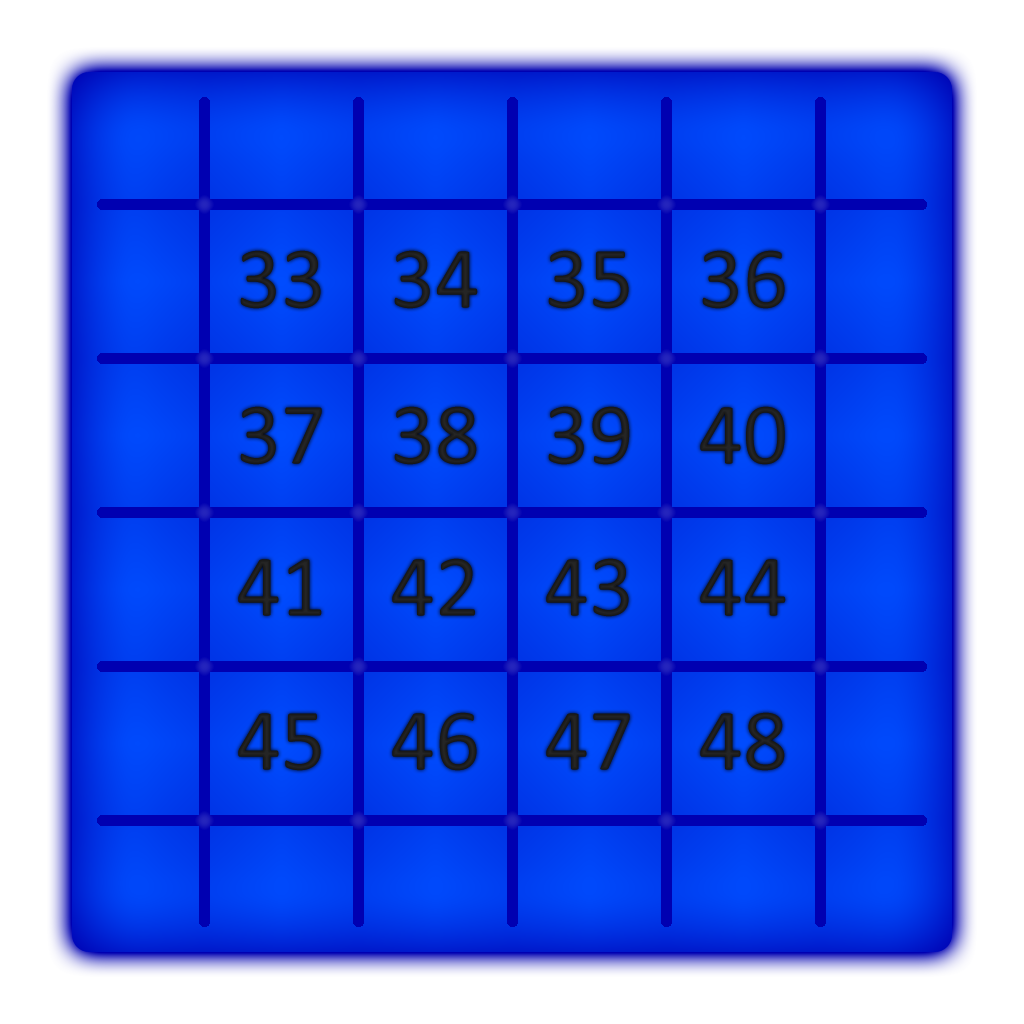
<style>
.page{position:relative;width:1024px;height:1024px}
.page>*{position:absolute;margin:0}
.t1{font:88.5px "Calibri";color:#1d1d1d}
.t2{font:88.5px "Calibri";color:#1e1e1e}
</style>
<div class="page">
<p class="t1" style="left:240px;top:250px;width:81px;height:59px">33</p>
<p class="t1" style="left:394px;top:250px;width:84px;height:59px">34</p>
<p class="t1" style="left:548px;top:250px;width:81px;height:59px">35</p>
<p class="t1" style="left:702px;top:250px;width:83px;height:59px">36</p>
<p class="t1" style="left:240px;top:406px;width:82px;height:59px">37</p>
<p class="t1" style="left:394px;top:406px;width:83px;height:59px">38</p>
<p class="t1" style="left:548px;top:406px;width:82px;height:59px">39</p>
<p class="t2" style="left:700px;top:406px;width:85px;height:59px">40</p>
<p class="t2" style="left:392px;top:558px;width:83px;height:58px">42</p>
<p class="t2" style="left:546px;top:558px;width:83px;height:59px">43</p>
<p class="t2" style="left:238px;top:559px;width:84px;height:57px">41</p>
<p class="t2" style="left:700px;top:559px;width:86px;height:57px">44</p>
<p class="t2" style="left:238px;top:713px;width:83px;height:58px">45</p>
<p class="t2" style="left:392px;top:712px;width:85px;height:59px">46</p>
<p class="t2" style="left:546px;top:713px;width:84px;height:57px">47</p>
<p class="t2" style="left:700px;top:712px;width:85px;height:59px">48</p>
</div>
